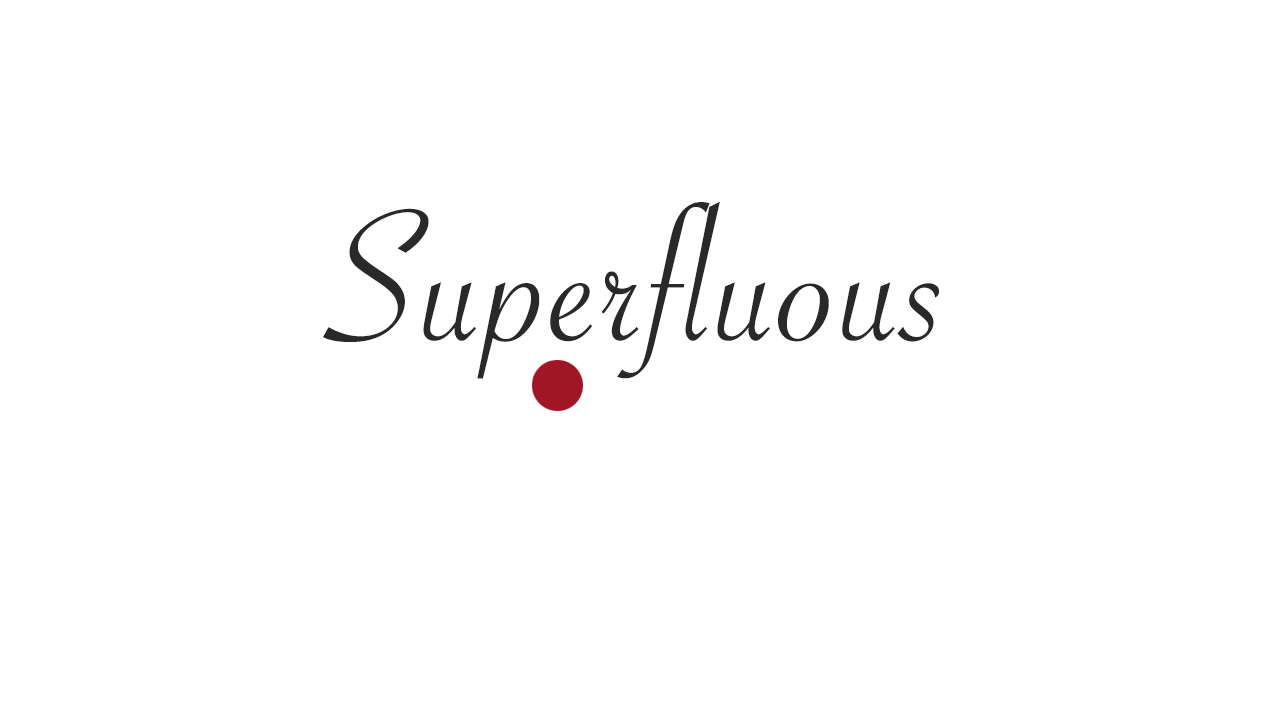
<style>
.page{position:relative;width:1280px;height:720px;background:#ffffff}
.page>*{position:absolute;margin:0}
.t1{font:200px "SavoyeLetPlain";letter-spacing:0.015em;color:#292929}
</style>
<div class="page">
<p class="t1" style="left:323px;top:202px;width:616px;height:177px">Superfluous</p>
</div>
